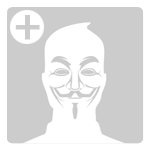
<style>
.page{position:relative;width:150px;height:150px;background:#cccccc}
.page>*{position:absolute;margin:0}
.t1{font:48px "Lato-Bold";color:#cccccc}
</style>
<div class="page">
<p class="t1" style="left:15px;top:15px;width:25px;height:25px">+</p>
</div>
